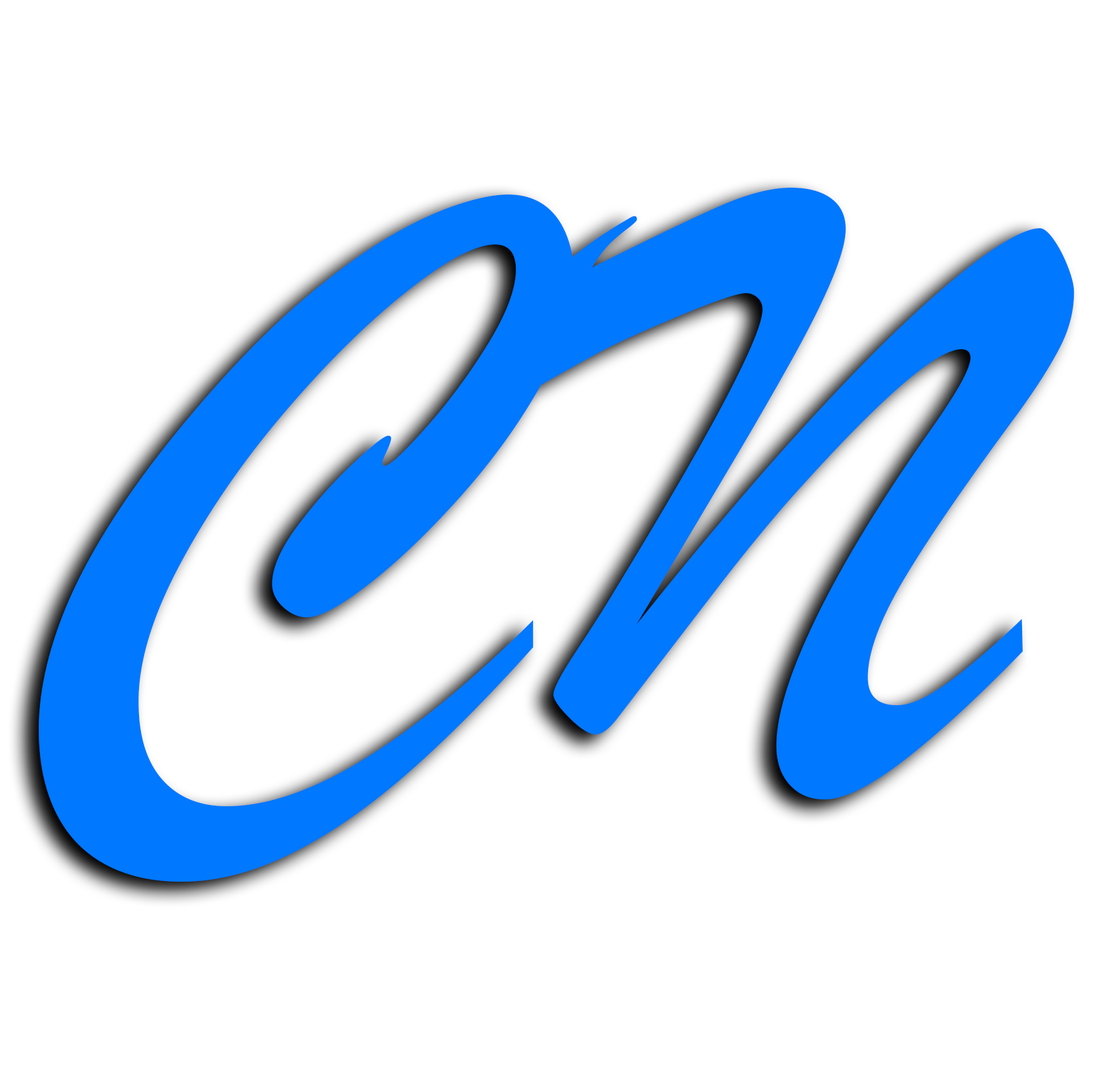
<style>
.page{position:relative;width:1115px;height:1070px;background:#ffffff}
.page>*{position:absolute;margin:0}
.t1{font:855.1px "BrushScriptMT";color:#0078ff}
</style>
<div class="page">
<p class="t1" style="left:39px;top:188px;width:1035px;height:694px">CN</p>
</div>
